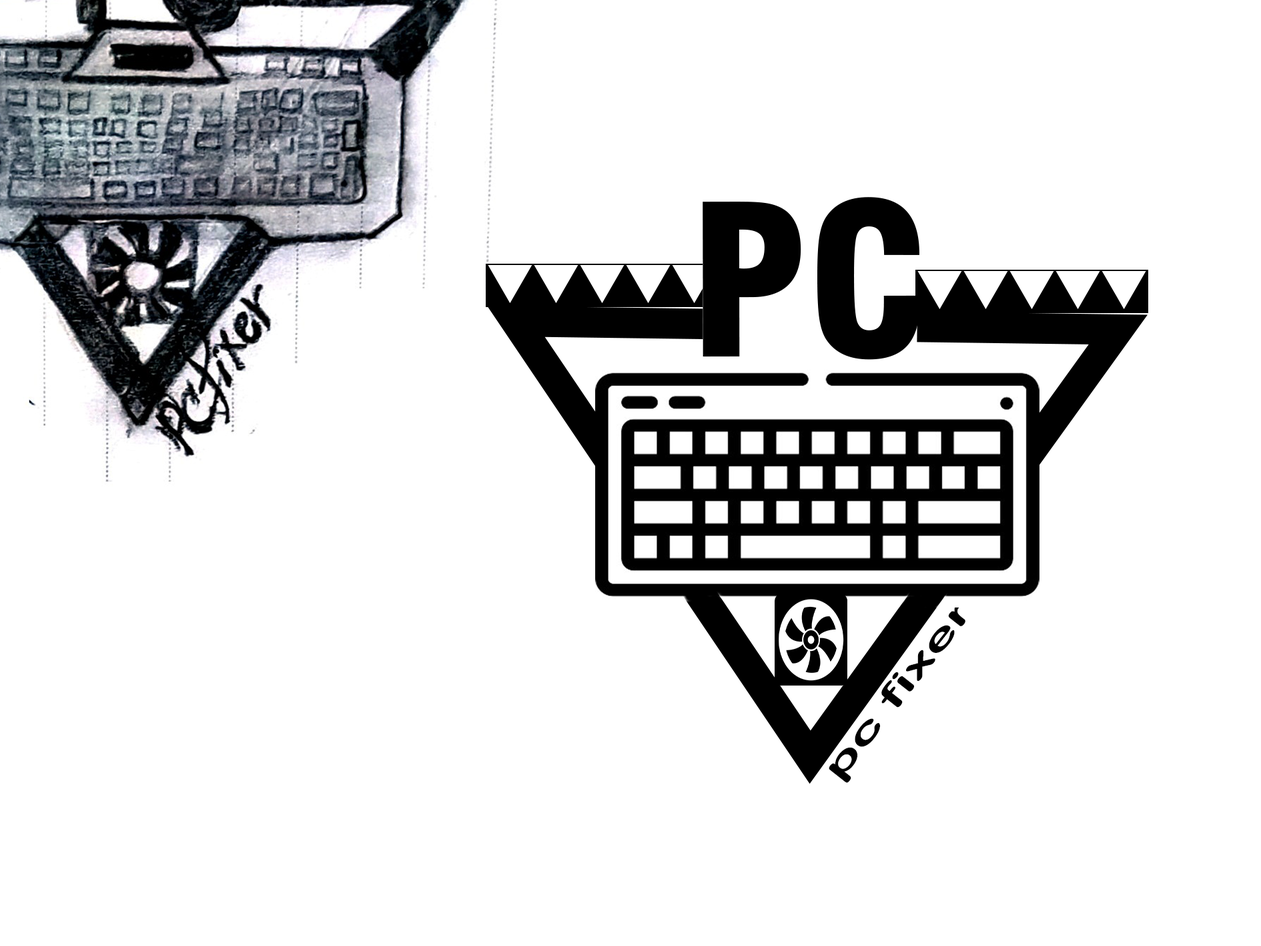
<style>
.page{position:relative;width:1261px;height:946px;background:#ffffff}
.page>*{position:absolute;margin:0}
.t1{font:205.7px "Swiss721BT-BlackCondensed";color:#000000}
.t2{font:33.4px "ArialRoundedMTBold";color:#000000;scale:1.82 1}
</style>
<div class="page">
<p class="t1" style="left:703px;top:197px;width:217px;height:163px">PC</p>
<p class="t2" style="left:829px;top:599px;width:137px;height:184px;rotate:-52deg">pc fixer</p>
</div>
